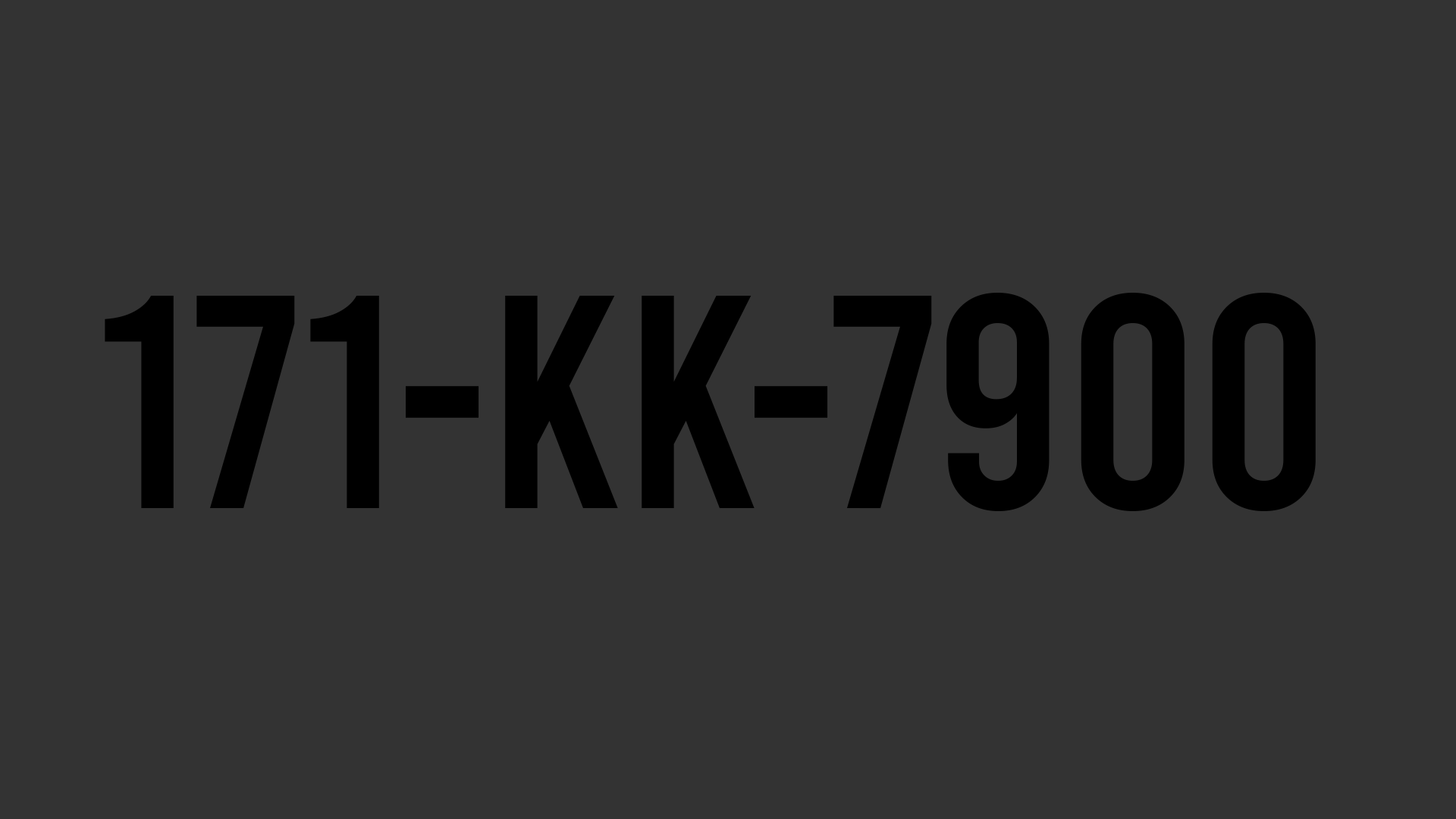
<style>
.page{position:relative;width:1456px;height:819px;background:#333333}
.page>*{position:absolute;margin:0}
.t1{font:303.3px "Bebas-Regular";color:#000000}
</style>
<div class="page">
<p class="t1" style="left:105px;top:292px;width:1211px;height:219px">171-kk-7900</p>
</div>
